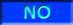
<style>
.page{position:relative;width:73px;height:25px;background:#003afe}
.page>*{position:absolute;margin:0}
.t1{font:17.5px "Verdana";font-weight:bold}
</style>
<div class="page">
<p class="t1" style="left:24px;top:5px;width:26px;height:14px">NO</p>
</div>
